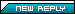
<style>
.page{position:relative;width:75px;height:14px;background:#ffffff}
.page>*{position:absolute;margin:0}
.t1{font:8px "BitDustTwo";color:#ffffff}
</style>
<div class="page">
<p class="t1" style="left:16px;top:6px;width:49px;height:5px">NEW REPLY</p>
</div>
